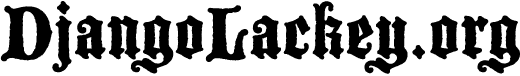
<style>
.page{position:relative;width:520px;height:76px;background:#ffffff}
.page>*{position:absolute;margin:0}
.t1{font:80px "BlackmoorLetPlain";letter-spacing:-0.025em;color:#000000;font-weight:bold}
</style>
<div class="page">
<p class="t1" style="left:0px;top:1px;width:520px;height:73px">DjangoLackey.org</p>
</div>
